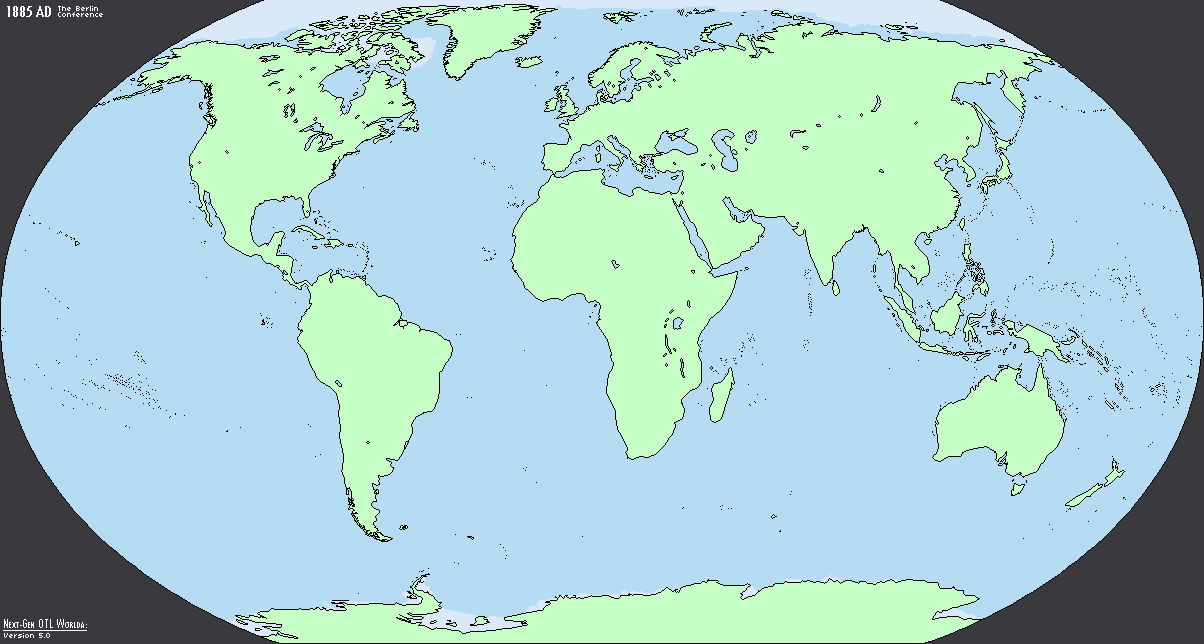
<style>
.page{position:relative;width:1204px;height:644px;background:#b6dcf4}
.page>*{position:absolute;margin:0}
.t1{font:18px "TwCenMT-Condensed";color:#ffffff;font-variant:small-caps}
.t2{font:8px "04b03";color:#ffffff}
</style>
<div class="page">
<p class="t1" style="left:7px;top:6px;width:44px;height:11px">1885 AD</p>
<p class="t2" style="left:58px;top:6px;width:40px;height:5px">The Berlin</p>
<p class="t2" style="left:58px;top:12px;width:45px;height:5px">Conference</p>
<p class="t2" style="left:4px;top:633px;width:46px;height:5px">Version 5.0</p>
</div>
